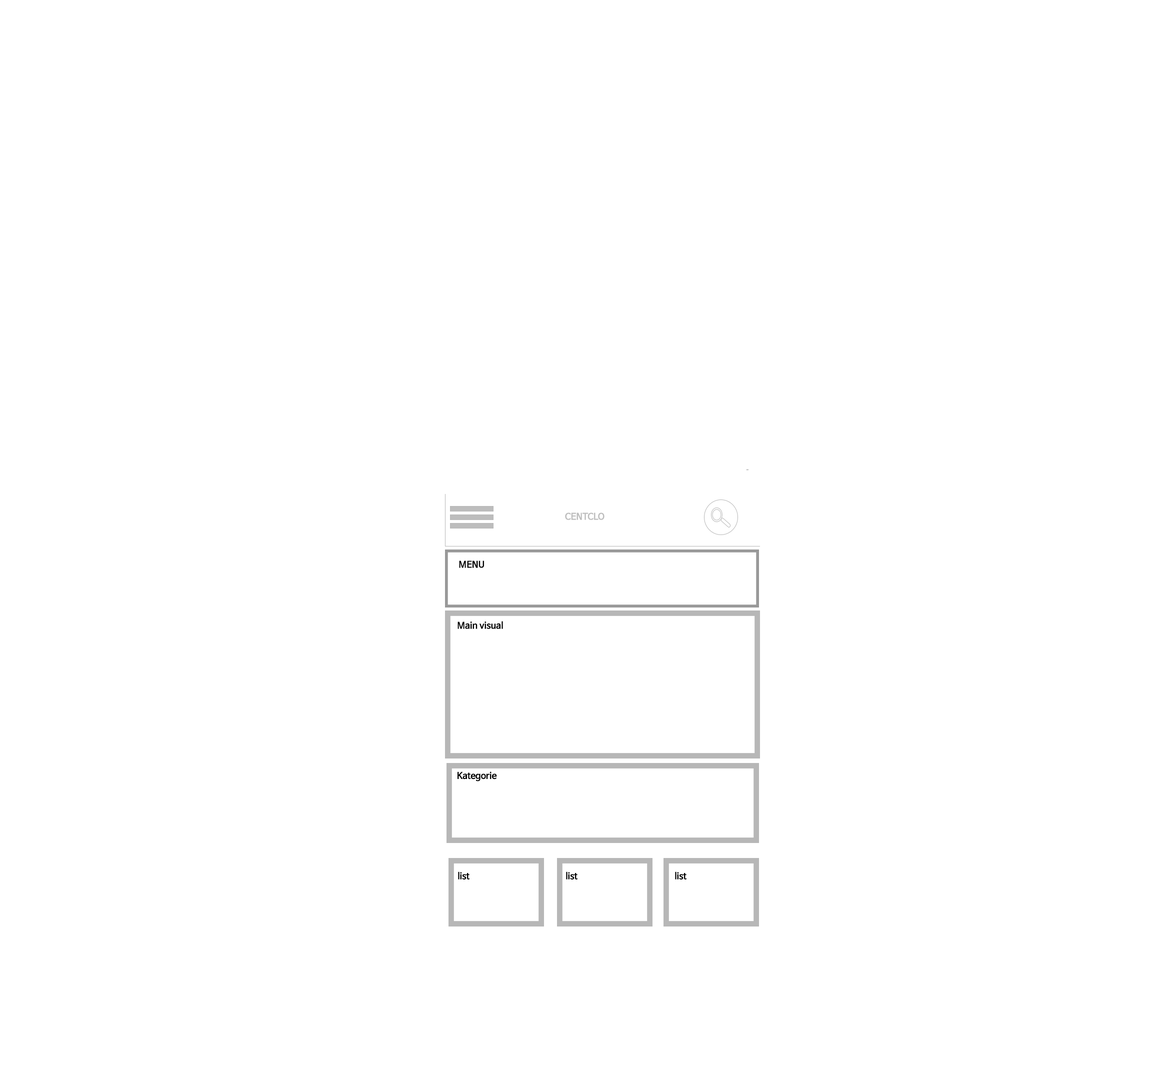
<style>
.page{position:relative;width:1152px;height:1080px;background:#ffffff}
.page>*{position:absolute;margin:0}
.t1{font:9px "NanumBarunGothicBold";color:#bdbdbd}
.t2{font:9px "NanumBarunGothicBold";color:#000000}
.t3{font:9px "NanumBarunGothicBold";color:#ffffff}
</style>
<div class="page">
<p class="t1" style="left:565px;top:512px;width:39px;height:8px">CENTCLO</p>
<p class="t2" style="left:459px;top:560px;width:25px;height:8px"><span class="t1"><br>      </span>MENU</p>
<p class="t2" style="left:458px;top:621px;width:45px;height:8px"><span class="t3"><br>      </span>Main visual</p>
<p class="t2" style="left:458px;top:772px;width:39px;height:10px">Kategorie</p>
<p class="t2" style="left:458px;top:872px;width:12px;height:8px">list</p>
<p class="t2" style="left:566px;top:872px;width:12px;height:8px">list</p>
<p class="t2" style="left:675px;top:872px;width:11px;height:8px">list</p>
</div>
